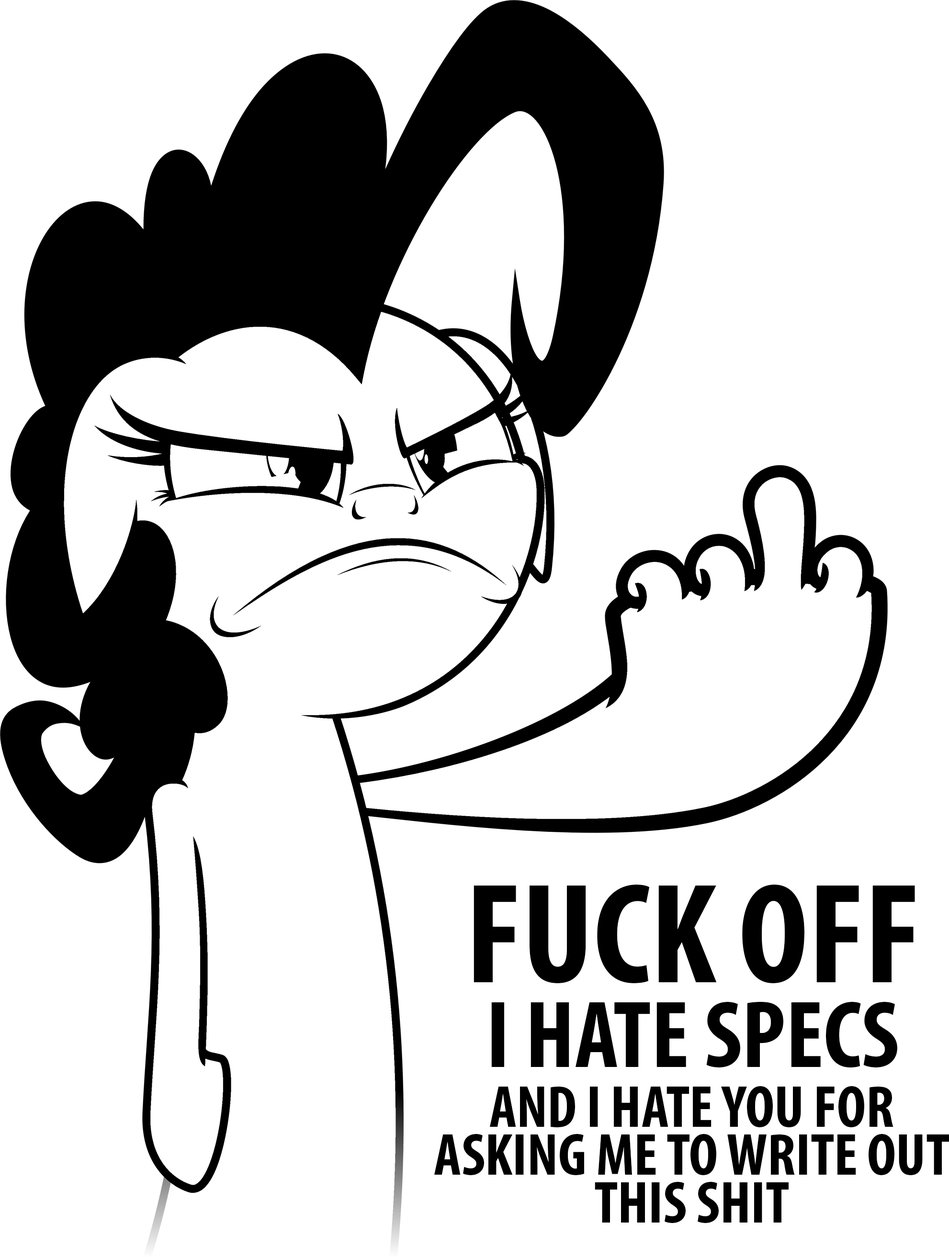
<style>
.page{position:relative;width:949px;height:1257px;background:#ffffff}
.page>*{position:absolute;margin:0}
.t1{font:143.6px "MyriadPro-BoldCond";color:#000000}
.t2{font:95.7px "MyriadPro-BoldCond";color:#000000}
.t3{font:59.8px/47.9px "MyriadPro-BoldCond";color:#000000}
</style>
<div class="page">
<p class="t1" style="left:473px;top:885px;width:442px;height:99px">FUCK OFF</p>
<p class="t2" style="left:491px;top:1001px;width:406px;height:66px">I HATE SPECS</p>
<p class="t3" style="left:434px;top:1086px;width:515px;height:137px;text-align:center">AND I HATE YOU FOR<br>ASKING ME TO WRITE OUT<br>THIS SHIT</p>
</div>
